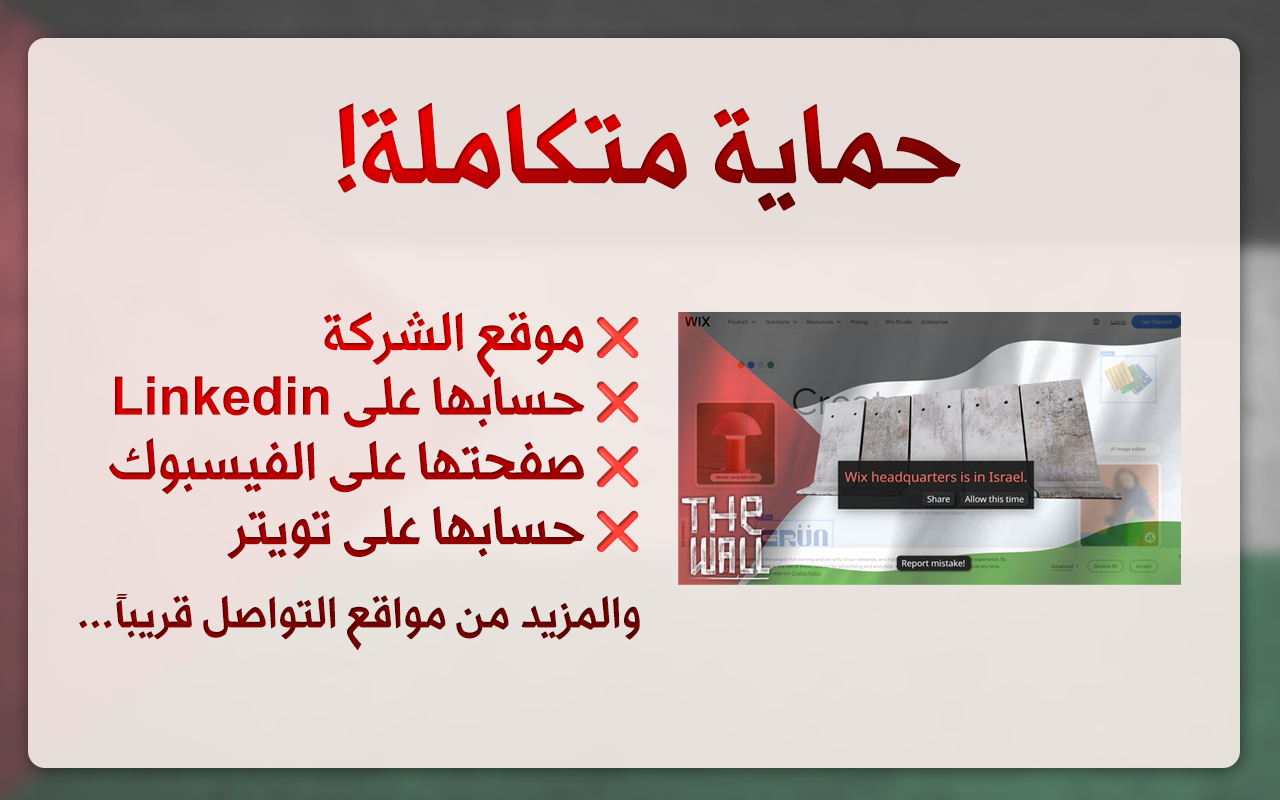
<style>
.page{position:relative;width:1280px;height:800px}
.page>*{position:absolute;margin:0}
.t1{font:111.1px "Watad-Regular"}
.t2{font:44.4px "Watad-Regular"}
.t3{font:37.3px "NotoColorEmoji-SVG"}
.t4{font:53.9px "Watad-Regular"}
.t5{font:44.4px "MyriadArabic-Regular"}
</style>
<div class="page">
<p class="t1" style="left:338px;top:102px;width:623px;height:109px">حماية متكاملة!‏</p>
<p class="t2" style="left:79px;top:311px;width:561px;height:339px"><span class="t3">❌ </span><span class="t4">موقع الشركة<br></span><span class="t3">❌ </span><span class="t4">حسابها على Linkedin<br></span><span class="t3">❌ </span><span class="t4">صفحتها على الفيسبوك<br></span><span class="t3">❌ </span><span class="t4">حسابها على تويتر<br><br></span>والمزيد من مواقع التواصل قريباً<span class="t5">‫</span>.<span class="t5">‫</span>.<span class="t5">‫</span>.<span class="t5">‫</span></p>
</div>
